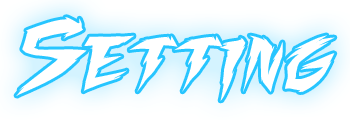
<style>
.page{position:relative;width:350px;height:120px;background:#ffffff}
.page>*{position:absolute;margin:0}
.t1{font:83.3px "FightingSpiritTBS";color:#ffffff}
</style>
<div class="page">
<p class="t1" style="left:16px;top:17px;width:319px;height:84px">Setting</p>
</div>
